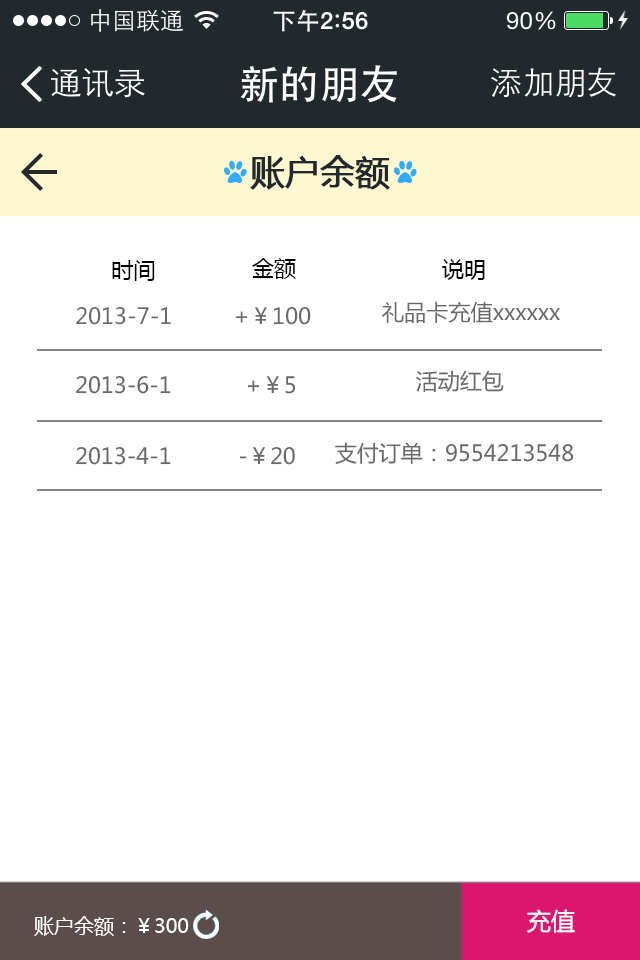
<style>
.page{position:relative;width:640px;height:960px;background:#ffffff}
.page>*{position:absolute;margin:0}
.t1{font:34px "MicrosoftYaHei";color:#22292c;font-weight:bold}
.t2{font:22px "MicrosoftYaHei";color:#000000}
.t3{font:22px "MicrosoftYaHei";color:#696969}
.t4{font:20px "MicrosoftYaHei";color:#ffffff}
.t5{font:20px "MicrosoftYaHei";color:#fffefe}
.t6{font:24px "MicrosoftYaHei";color:#ffffff}
</style>
<div class="page">
<p class="t1" style="left:250px;top:155px;width:140px;height:35px">账户余额</p>
<p class="t2" style="left:112px;top:260px;width:43px;height:21px">时间</p>
<p class="t2" style="left:252px;top:258px;width:44px;height:21px">金额</p>
<p class="t2" style="left:442px;top:259px;width:43px;height:21px">说明</p>
<p class="t3" style="left:382px;top:301px;width:178px;height:22px">礼品卡充值xxxxxx</p>
<p class="t3" style="left:76px;top:307px;width:95px;height:18px">2013-7-1</p>
<p class="t3" style="left:236px;top:307px;width:75px;height:18px">+￥100</p>
<p class="t3" style="left:76px;top:375px;width:95px;height:19px">2013-6-1</p>
<p class="t3" style="left:247px;top:376px;width:49px;height:18px">+￥5</p>
<p class="t3" style="left:416px;top:370px;width:88px;height:23px">活动红包</p>
<p class="t3" style="left:76px;top:446px;width:95px;height:19px">2013-4-1</p>
<p class="t3" style="left:239px;top:446px;width:56px;height:19px">-￥20</p>
<p class="t3" style="left:335px;top:442px;width:239px;height:23px">支付订单：9554213548</p>
<p class="t4" style="left:34px;top:916px;width:155px;height:20px">账户余额：<span class="t5">￥</span>300</p>
<p class="t6" style="left:527px;top:909px;width:48px;height:24px">充值</p>
</div>
